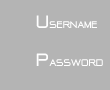
<style>
.page{position:relative;width:110px;height:90px;background:#b4b4b4}
.page>*{position:absolute;margin:0}
.t1{font:12px "-@-D-RCW2550v.2.00-";color:#ffffff}
.t2{font:22px "-@-D-RCW2550v.2.00-";color:#ffffff}
</style>
<div class="page">
<p class="t1" style="left:36px;top:15px;width:61px;height:13px"><span class="t2">U</span>SERNAME</p>
<p class="t1" style="left:36px;top:53px;width:67px;height:13px"><span class="t2">P</span>ASSWORD</p>
</div>
